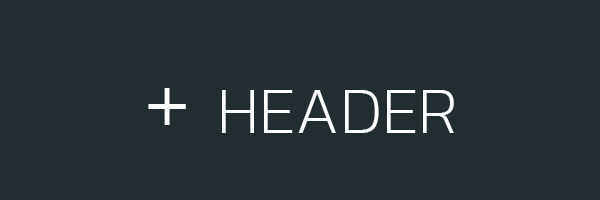
<style>
.page{position:relative;width:600px;height:200px;background:#222d32}
.page>*{position:absolute;margin:0}
.t1{font:66.7px "Kanit-ExtraLight";color:#fcfefe}
.t2{font:100px "Kanit-ExtraLight";color:#fcfefe}
</style>
<div class="page">
<p class="t1" style="left:148px;top:88px;width:306px;height:45px"><span class="t2">+</span> HEADER</p>
</div>
